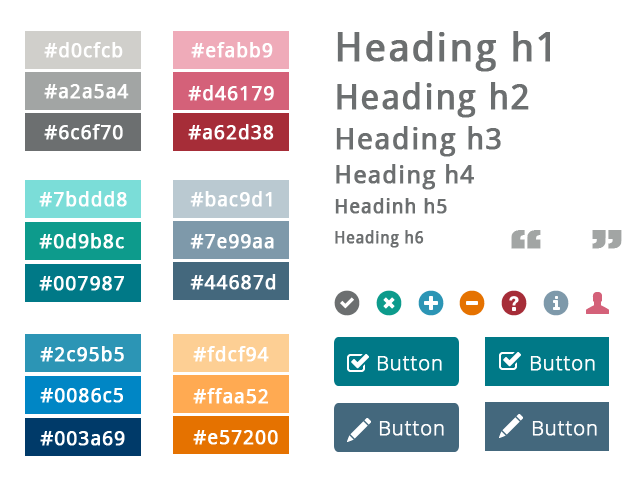
<style>
.page{position:relative;width:640px;height:480px;background:#ffffff}
.page>*{position:absolute;margin:0}
.t1{font:40px/48px "DroidSans";letter-spacing:0.025em;color:#6c6f70;font-weight:bold}
.t2{font:35px/48px "DroidSans";letter-spacing:0.025em;color:#6c6f70;font-weight:bold}
.t3{font:30px/40px "DroidSans";letter-spacing:0.025em;color:#6c6f70;font-weight:bold}
.t4{font:25px/34px "DroidSans";letter-spacing:0.025em;color:#6c6f70;font-weight:bold}
.t5{font:20px/30px "DroidSans";letter-spacing:0.025em;color:#6c6f70;font-weight:bold}
.t6{font:16px/30px "DroidSans";letter-spacing:0.025em;color:#6c6f70;font-weight:bold}
.t7{font:20px "DroidSans";letter-spacing:0.025em;color:#ffffff;font-weight:bold}
.t8{font:48px "Rockwell-ExtraBold";letter-spacing:0.025em;color:#a2a5a4;font-weight:bold}
.t9{font:20px "OpenSans-Light";letter-spacing:0.025em;color:#fefefe;font-weight:bold}
</style>
<div class="page">
<p class="t1" style="left:335px;top:31px;width:215px;height:217px">Heading h1<br><span class="t2">Heading h2<br></span><span class="t3">Heading h3<br></span><span class="t4">Heading h4<br></span><span class="t5">Headinh h5<br></span><span class="t6">Heading h6</span></p>
<p class="t7" style="left:44px;top:42px;width:79px;height:16px">#d0cfcb</p>
<p class="t7" style="left:191px;top:42px;width:82px;height:16px">#efabb9</p>
<p class="t7" style="left:44px;top:84px;width:85px;height:15px">#a2a5a4</p>
<p class="t7" style="left:188px;top:85px;width:86px;height:16px">#d46179</p>
<p class="t7" style="left:44px;top:124px;width:79px;height:16px">#6c6f70</p>
<p class="t7" style="left:188px;top:124px;width:86px;height:16px">#a62d38</p>
<p class="t7" style="left:39px;top:191px;width:88px;height:16px">#7bddd8</p>
<p class="t7" style="left:190px;top:191px;width:82px;height:16px">#bac9d1</p>
<p class="t7" style="left:39px;top:233px;width:85px;height:16px">#0d9b8c</p>
<p class="t8" style="left:511px;top:230px;width:111px;height:19px">“   ”</p>
<p class="t7" style="left:190px;top:234px;width:84px;height:15px">#7e99aa</p>
<p class="t7" style="left:39px;top:276px;width:85px;height:15px">#007987</p>
<p class="t7" style="left:190px;top:274px;width:86px;height:16px">#44687d</p>
<p class="t7" style="left:40px;top:346px;width:84px;height:16px">#2c95b5</p>
<p class="t7" style="left:193px;top:346px;width:76px;height:16px">#fdcf94</p>
<p class="t9" style="left:377px;top:356px;width:65px;height:15px">Button</p>
<p class="t9" style="left:530px;top:356px;width:65px;height:15px">Button</p>
<p class="t7" style="left:40px;top:388px;width:83px;height:15px">#0086c5</p>
<p class="t7" style="left:193px;top:388px;width:75px;height:16px">#ffaa52</p>
<p class="t9" style="left:379px;top:421px;width:65px;height:15px">Button</p>
<p class="t9" style="left:532px;top:421px;width:65px;height:15px">Button</p>
<p class="t7" style="left:40px;top:431px;width:85px;height:15px">#003a69</p>
<p class="t7" style="left:193px;top:430px;width:85px;height:15px">#e57200</p>
</div>
